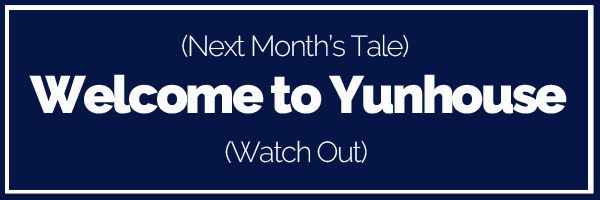
<style>
.page{position:relative;width:600px;height:200px;background:#051646}
.page>*{position:absolute;margin:0}
.t1{font:28.9px "Raleway-Light";letter-spacing:-0.05em;color:#fbfbfc}
.t2{font:52.4px "Raleway-Black";letter-spacing:-0.05em;color:#fbfbfc}
</style>
<div class="page">
<p class="t1" style="left:182px;top:34px;width:227px;height:23px">(Next Month’s Tale)</p>
<p class="t2" style="left:29px;top:74px;width:538px;height:40px">Welcome to Yunhouse</p>
<p class="t1" style="left:225px;top:140px;width:142px;height:23px">(Watch Out)</p>
</div>
